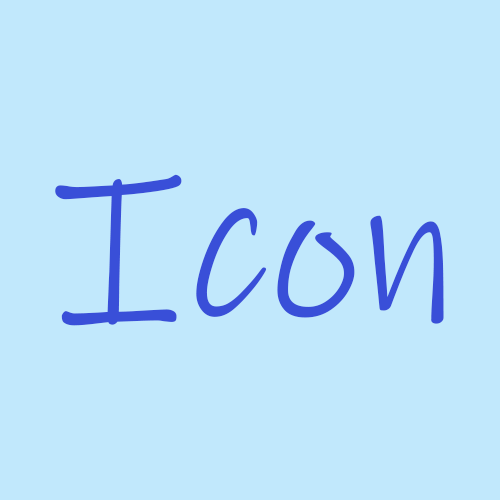
<style>
.page{position:relative;width:500px;height:500px;background:#c1e8fc}
.page>*{position:absolute;margin:0}
.t1{font:211.7px "InkFree";color:#394fd8}
</style>
<div class="page">
<p class="t1" style="left:55px;top:174px;width:389px;height:152px">Icon</p>
</div>
